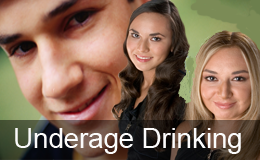
<style>
.page{position:relative;width:260px;height:160px}
.page>*{position:absolute;margin:0}
.t1{font:27.5px "ArialMT";color:#fcfbfb}
</style>
<div class="page">
<p class="t1" style="left:15px;top:128px;width:226px;height:26px">Underage Drinking</p>
</div>
